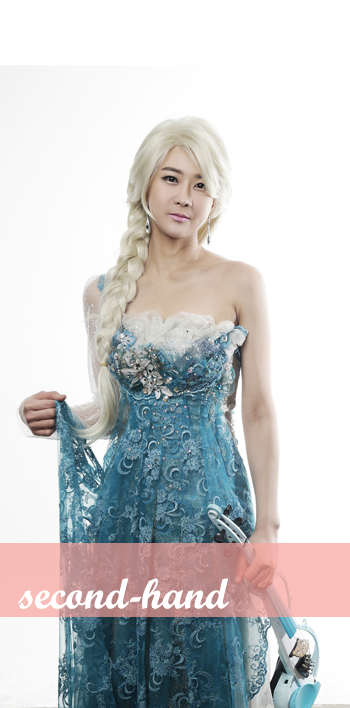
<style>
.page{position:relative;width:350px;height:708px;background:#ffffff}
.page>*{position:absolute;margin:0}
.t1{font:42.7px "ScriptMTBold";color:#ffffff}
</style>
<div class="page">
<p class="t1" style="left:18px;top:578px;width:211px;height:31px">second-hand</p>
</div>
